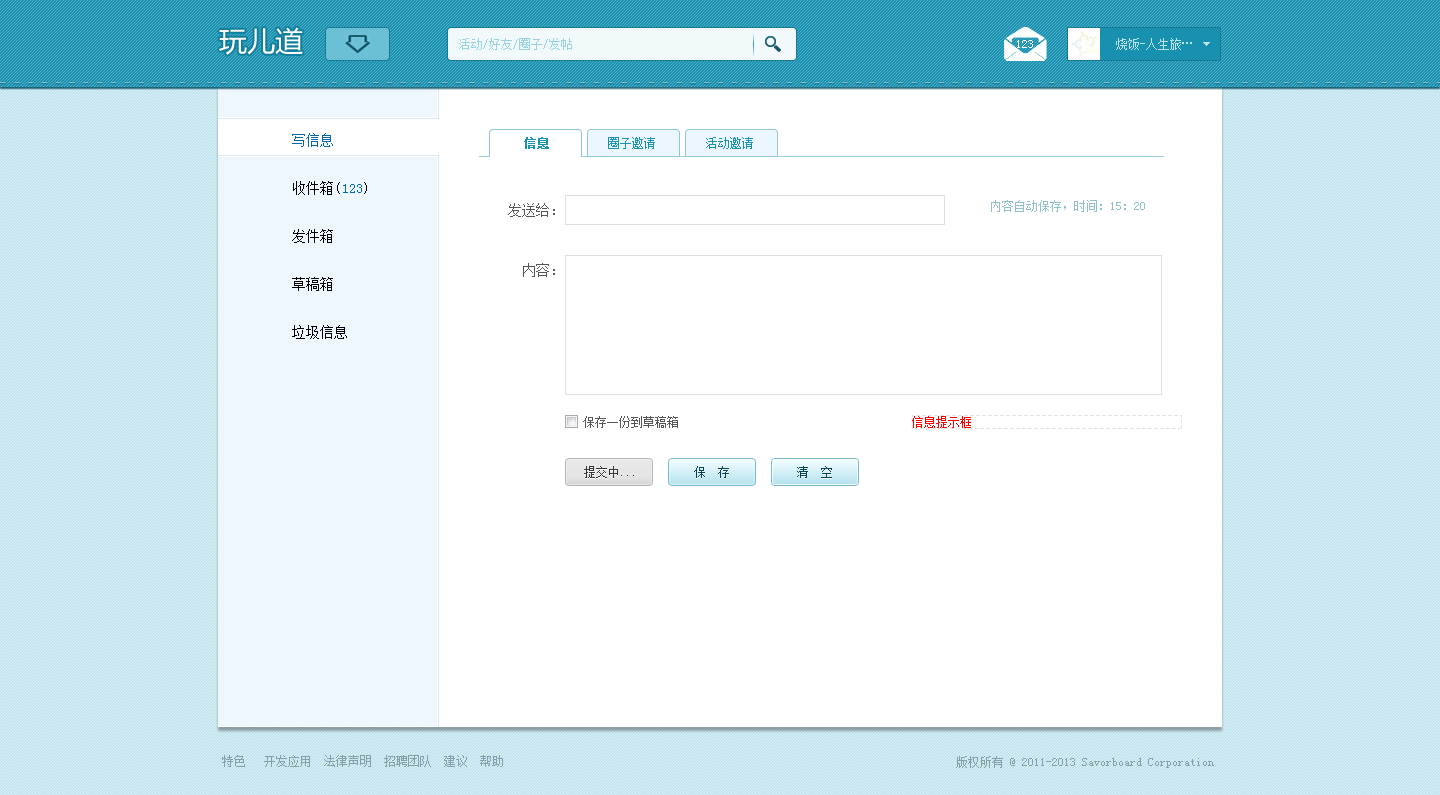
<style>
.page{position:relative;width:1440px;height:795px;background:#ffffff}
.page>*{position:absolute;margin:0}
.t1{font:28px "MicrosoftYaHei";color:#ffffff}
.t2{font:12px "SimSun";color:#98d3e4}
.t3{font:12px "SimSun";color:#ffffff}
.t4{font:14px/48px "SimSun";letter-spacing:0.01em;color:#000000}
.t5{font:14px/48px "SimSun";letter-spacing:0.01em;color:#0666ae}
.t6{font:12px "SimSun";color:#1992b1;font-weight:bold}
.t7{font:12px "SimSun";color:#1992b1}
.t8{font:14px/60px "SimSun";color:#555555}
.t9{font:12px "SimSun";color:#8fc0cc}
.t10{font:12px "SimSun";color:#a6a6a6}
.t11{font:12px "SimSun";color:#555555}
.t12{font:12px "SimSun";color:#333333}
.t13{font:12px "SimSun";color:#044455}
.t14{font:12px "SimSun";color:#849fa6}
</style>
<div class="page">
<p class="t1" style="left:219px;top:27px;width:84px;height:28px">玩儿道</p>
<p class="t2" style="left:459px;top:38px;width:113px;height:12px">活动/好友/圈子/发帖</p>
<p class="t3" style="left:1017px;top:40px;width:16px;height:8px">123</p>
<p class="t4" style="left:292px;top:133px;width:75px;height:206px"><span class="t5">写信息<br></span>收件箱(<span class="t5">123</span>)<br>发件箱<br>草稿箱<br>垃圾信息</p>
<p class="t6" style="left:524px;top:137px;width:25px;height:12px">信息</p>
<p class="t7" style="left:608px;top:137px;width:47px;height:12px">圈子邀请</p>
<p class="t7" style="left:706px;top:137px;width:47px;height:12px">活动邀请</p>
<p class="t8" style="left:508px;top:203px;width:47px;height:74px;text-align:right">发送给：<br>内容：</p>
<p class="t9" style="left:991px;top:200px;width:154px;height:12px"><span class="t10"> </span>内容自动保存，时间：15：20</p>
<p class="t11" style="left:583px;top:416px;width:95px;height:12px">保存一份到草稿箱</p>
<p class="t12" style="left:584px;top:466px;width:50px;height:12px">提交中...</p>
<p class="t13" style="left:694px;top:466px;width:35px;height:12px">保  存</p>
<p class="t13" style="left:797px;top:466px;width:35px;height:12px">清  空</p>
<p class="t14" style="left:222px;top:755px;width:281px;height:12px">特色   开发应用  法律声明  招聘团队  建议  帮助</p>
<p class="t14" style="left:956px;top:756px;width:258px;height:12px">版权所有 @ 2011-2013 Savorboard Corporation</p>
</div>
